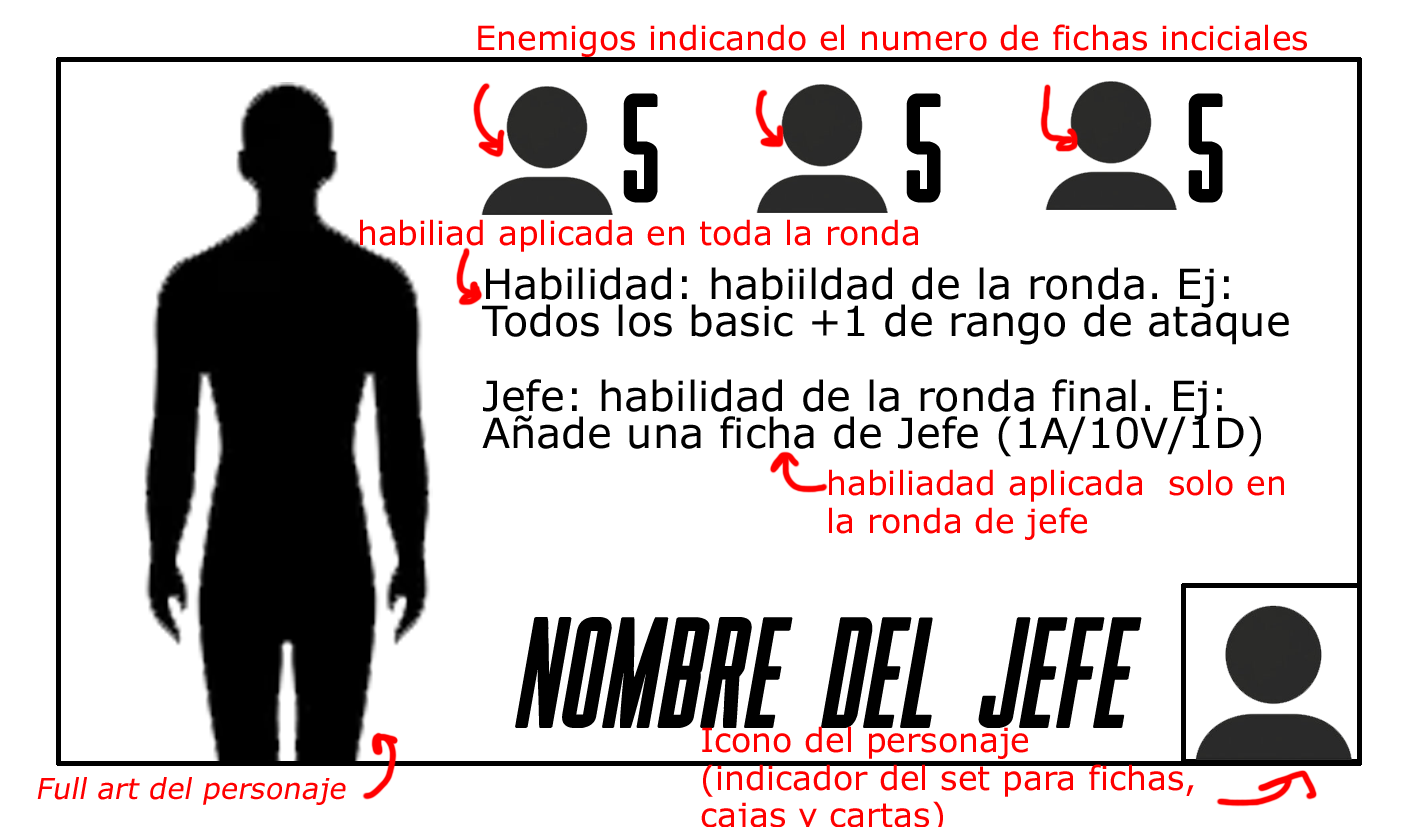
<style>
.page{position:relative;width:1417px;height:827px;background:#ffffff}
.page>*{position:absolute;margin:0}
.t1{font:33.2px "Verdana";color:#ff0000}
.t2{font:161.9px "Rainbow";color:#000000}
.t3{font:41.5px/37.4px "Verdana";color:#000000}
.t4{font:33.2px/37.4px "Verdana";color:#ff0000}
.t5{font:161.9px "Rainbow";color:#000000;font-style:italic}
.t6{font:29.1px "Verdana";color:#ff0000;font-style:italic}
</style>
<div class="page">
<p class="t1" style="left:478px;top:24px;width:829px;height:33px">Enemigos indicando el numero de fichas inciciales</p>
<p class="t2" style="left:623px;top:93px;width:600px;height:110px">5      5      5</p>
<p class="t1" style="left:360px;top:219px;width:558px;height:33px">habiliad aplicada en toda la ronda</p>
<p class="t3" style="left:482px;top:267px;width:807px;height:190px">Habilidad: habiildad de la ronda. Ej: Todos los basic +1 de rango de ataque<br><br>Jefe: habilidad de la ronda final. Ej:<br>Añade una ficha de Jefe (1A/10V/1D)</p>
<p class="t4" style="left:829px;top:469px;width:455px;height:71px">habiliadad aplicada  solo en <br>la ronda de jefe</p>
<p class="t5" style="left:515px;top:617px;width:627px;height:111px">NOMBRE DEL JEFE</p>
<p class="t6" style="left:37px;top:777px;width:309px;height:28px">Full art del personaje</p>
</div>
